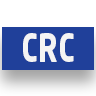
<style>
.page{position:relative;width:96px;height:96px;background:#20409a}
.page>*{position:absolute;margin:0}
.t1{font:39.1px "NeoTech-Bold";color:#f4f4f4;scale:0.75 1}
</style>
<div class="page">
<p class="t1" style="left:23px;top:33px;width:51px;height:29px">CRC</p>
</div>
